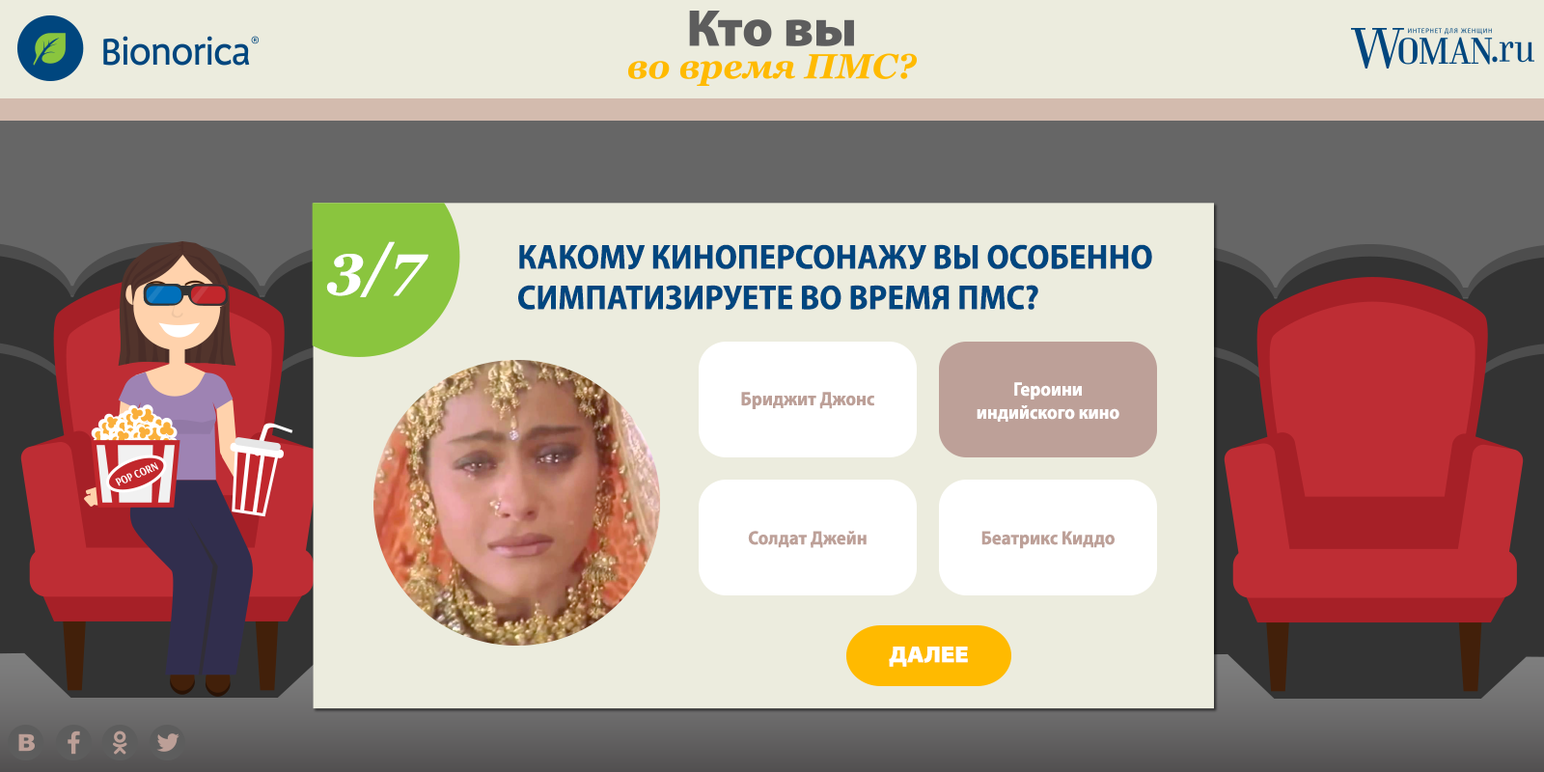
<style>
.page{position:relative;width:1544px;height:772px;background:#ececde}
.page>*{position:absolute;margin:0}
.t1{font:57.9px "Georgia-BoldItalic";color:#ffffff}
.t2{font:34.7px/40.5px "MyriadPro-BoldSemiCn";color:#00467f;text-transform:uppercase}
.t3{font:19.3px "MyriadPro-BoldSemiCn";color:#ffffff}
.t4{font:19.3px "MyriadPro-BoldSemiCn";color:#bda098}
.t5{font:23.2px "MyriadPro-BlackSemiExt";color:#ffffff;text-transform:uppercase}
</style>
<div class="page">
<p class="t1" style="left:326px;top:241px;width:103px;height:56px">3/7</p>
<p class="t2" style="left:518px;top:244px;width:634px;height:66px">Какому киноперсонажу вы особенно симпатизируете во время ПМС?</p>
<p class="t3" style="left:977px;top:382px;width:143px;height:40px;text-align:center">Героини <br>индийского кино</p>
<p class="t4" style="left:741px;top:392px;width:133px;height:17px">Бриджит Джонс</p>
<p class="t4" style="left:748px;top:531px;width:119px;height:17px">Солдат Джейн</p>
<p class="t4" style="left:982px;top:531px;width:133px;height:18px">Беатрикс Киддо</p>
<p class="t5" style="left:889px;top:647px;width:79px;height:20px">далее</p>
</div>
